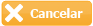
<style>
.page{position:relative;width:93px;height:26px}
.page>*{position:absolute;margin:0}
.t1{font:12px "Tahoma-Bold";color:#ffffff}
</style>
<div class="page">
<p class="t1" style="left:30px;top:8px;width:53px;height:10px">Cancelar</p>
</div>
